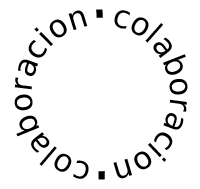
<style>
.page{position:relative;width:200px;height:189px;background:#ffffff}
.page>*{position:absolute;margin:0}
.t1{font:31px "DejaVuSans";color:#000000}
.t2{font:66.3px/0px "DejaVuSans";color:#000000;scale:0.9 1}
</style>
<div class="page">
<p class="t1" style="left:14px;top:9px;width:174px;height:171px">colaboracion<span class="t2">.</span>colaboracion<span class="t2">.</span></p>
</div>
